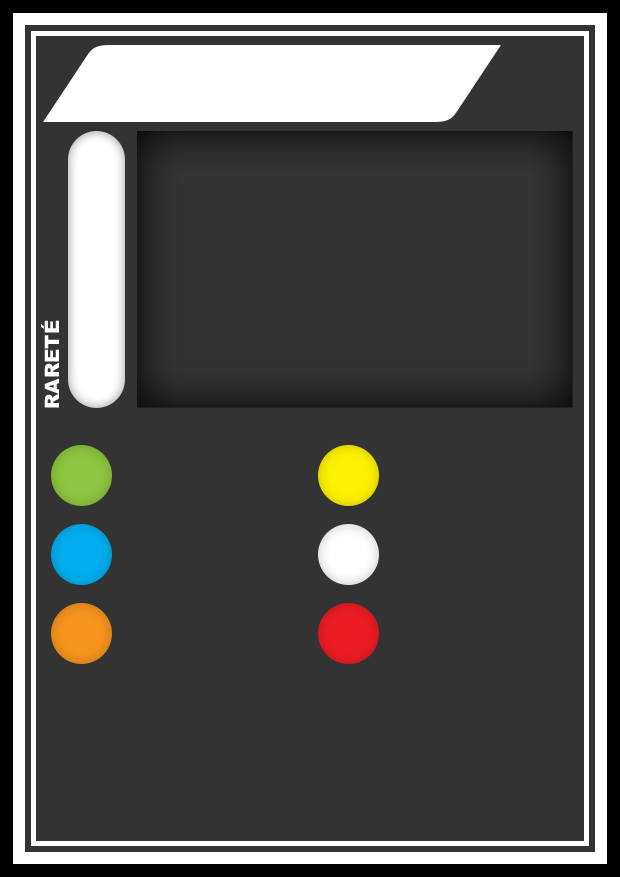
<style>
.page{position:relative;width:620px;height:877px;background:#333333}
.page>*{position:absolute;margin:0}
.t1{font:19.8px "Arial-Black";color:#ffffff}
</style>
<div class="page">
<p class="t1" style="left:41px;top:320px;width:18px;height:88px;rotate:-90deg">RARETÉ</p>
</div>
